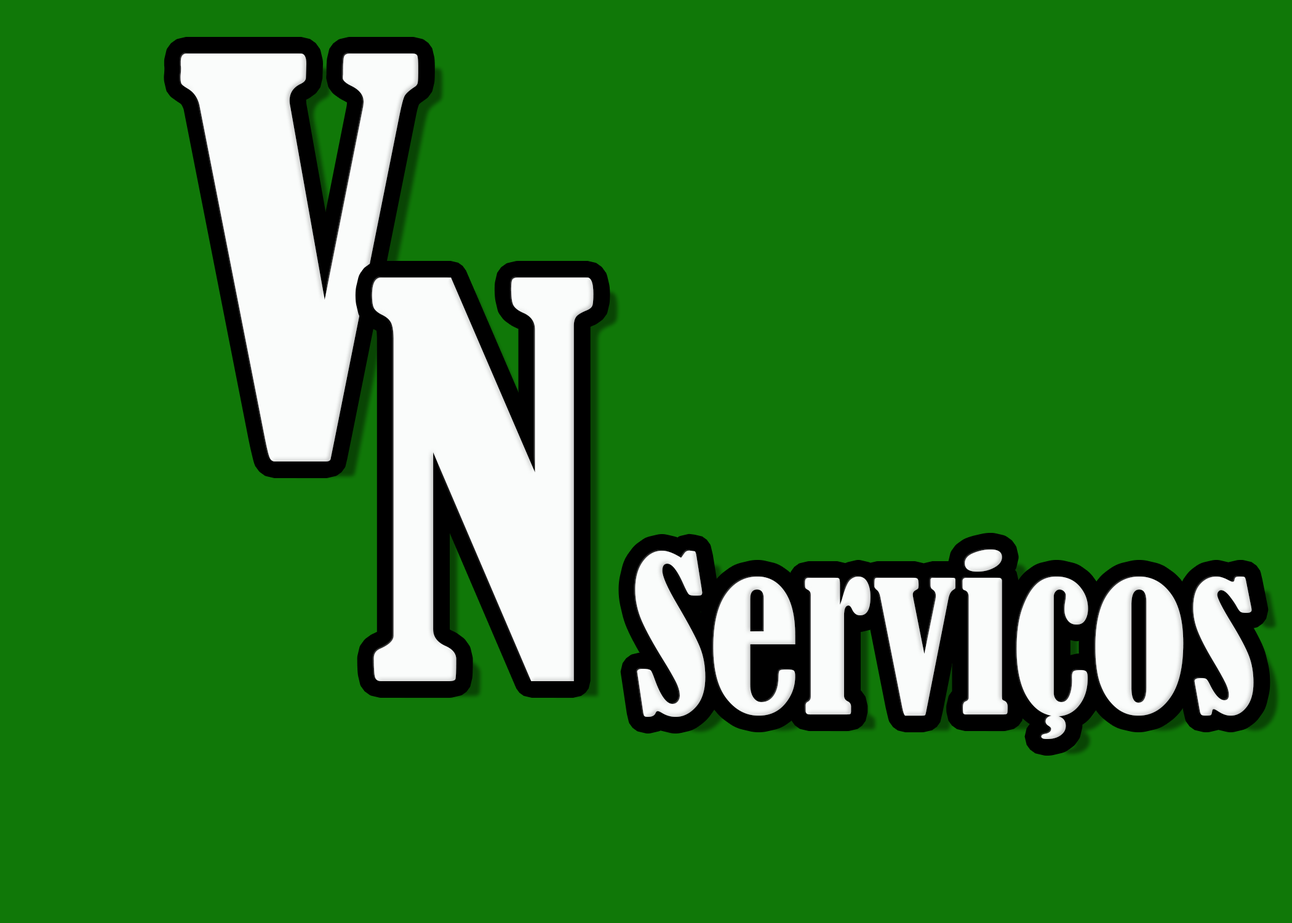
<style>
.page{position:relative;width:1292px;height:923px;background:#107808}
.page>*{position:absolute;margin:0}
.t1{font:512.7px "BernardMT-Condensed";color:#fafcfb}
.t2{font:205.1px "BernardMT-Condensed";color:#fafcfb}
</style>
<div class="page">
<p class="t1" style="left:180px;top:54px;width:238px;height:407px">V</p>
<p class="t1" style="left:372px;top:277px;width:222px;height:404px">N</p>
<p class="t2" style="left:635px;top:549px;width:619px;height:190px">Serviços</p>
</div>
